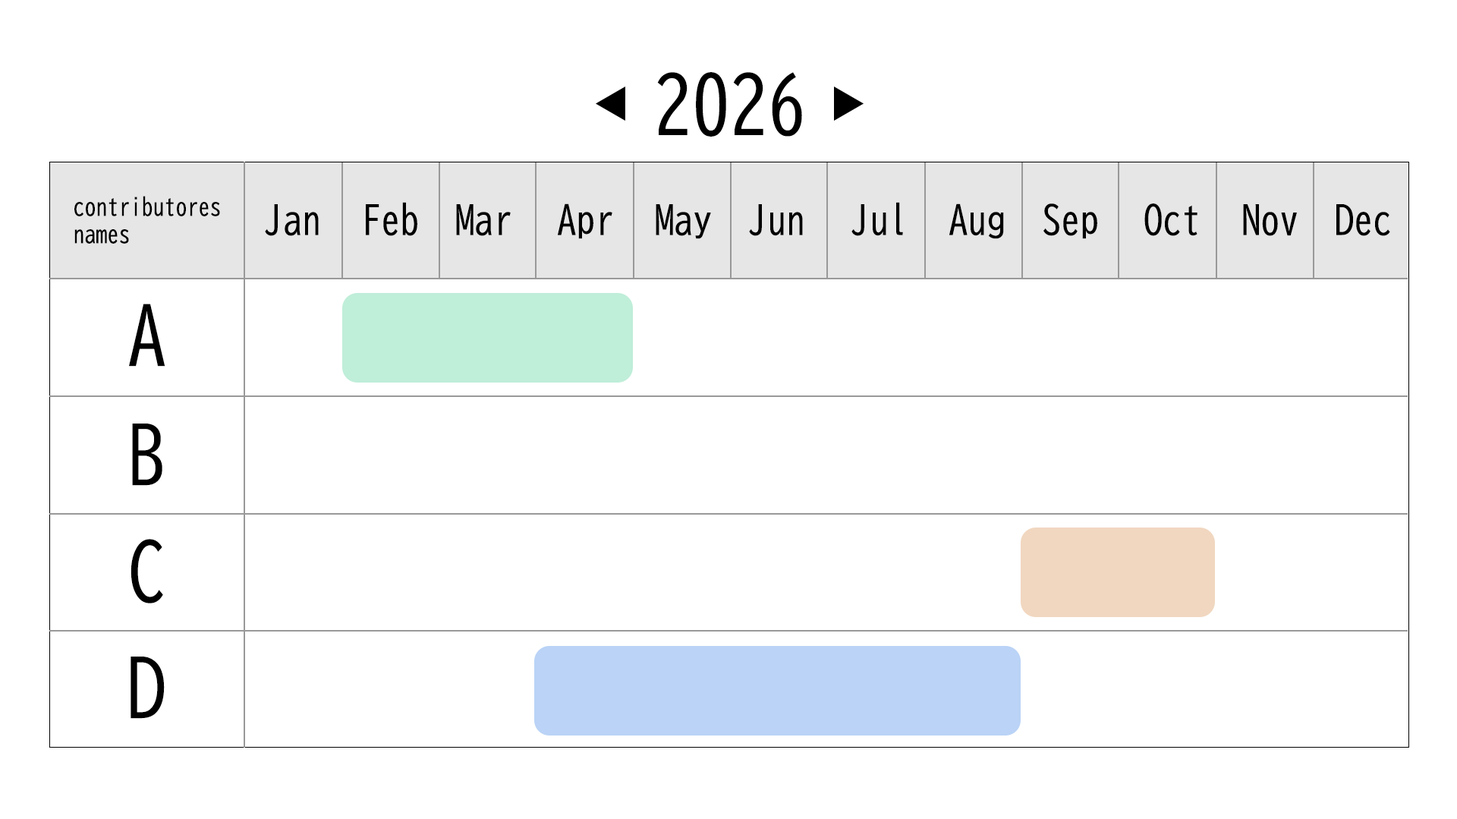
<style>
.page{position:relative;width:1457px;height:819px;background:#ffffff}
.page>*{position:absolute;margin:0}
.t1{font:75.9px "BIZ-UDGothic";color:#010101}
.t2{font:22.8px "BIZ-UDGothic";color:#010101}
.t3{font:37.9px "BIZ-UDGothic";color:#010101}
</style>
<div class="page">
<p class="t1" style="left:657px;top:72px;width:145px;height:65px">2026</p>
<p class="t2" style="left:74px;top:196px;width:146px;height:48px">contributores<br>names</p>
<p class="t3" style="left:265px;top:204px;width:54px;height:32px">Jan</p>
<p class="t3" style="left:366px;top:202px;width:51px;height:34px">Feb</p>
<p class="t3" style="left:456px;top:204px;width:55px;height:32px">Mar</p>
<p class="t3" style="left:558px;top:203px;width:54px;height:36px">Apr</p>
<p class="t3" style="left:655px;top:204px;width:56px;height:35px">May</p>
<p class="t3" style="left:749px;top:204px;width:54px;height:32px">Jun</p>
<p class="t3" style="left:851px;top:202px;width:52px;height:34px">Jul</p>
<p class="t3" style="left:949px;top:203px;width:55px;height:36px">Aug</p>
<p class="t3" style="left:1043px;top:203px;width:54px;height:36px">Sep</p>
<p class="t3" style="left:1144px;top:203px;width:53px;height:33px">Oct</p>
<p class="t3" style="left:1243px;top:204px;width:54px;height:32px">Nov</p>
<p class="t3" style="left:1336px;top:204px;width:54px;height:32px">Dec</p>
<p class="t1" style="left:129px;top:303px;width:36px;height:63px">A</p>
<p class="t1" style="left:132px;top:423px;width:30px;height:63px">B</p>
<p class="t1" style="left:130px;top:539px;width:33px;height:64px">C</p>
<p class="t1" style="left:130px;top:656px;width:35px;height:62px">D</p>
</div>
